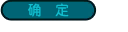
<style>
.page{position:relative;width:128px;height:32px;background:#ffffff}
.page>*{position:absolute;margin:0}
.t1{font:13.3px "FZY3--GB1-4";letter-spacing:0.08em;color:#12bccd}
</style>
<div class="page">
<p class="t1" style="left:28px;top:3px;width:41px;height:14px">确   定</p>
</div>
